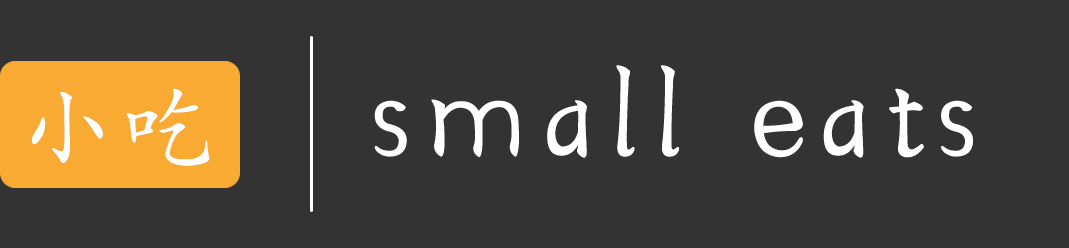
<style>
.page{position:relative;width:1069px;height:248px;background:#333333}
.page>*{position:absolute;margin:0}
.t1{font:133.3px "FZKTJW--GB1-0";letter-spacing:0.1em;color:#ffffff}
.t2{font:93.3px "FZKTJW--GB1-0";letter-spacing:0.1em;color:#ffffff}
</style>
<div class="page">
<p class="t1" style="left:374px;top:65px;width:599px;height:93px">small eats</p>
<p class="t2" style="left:32px;top:88px;width:178px;height:78px">小吃</p>
</div>
